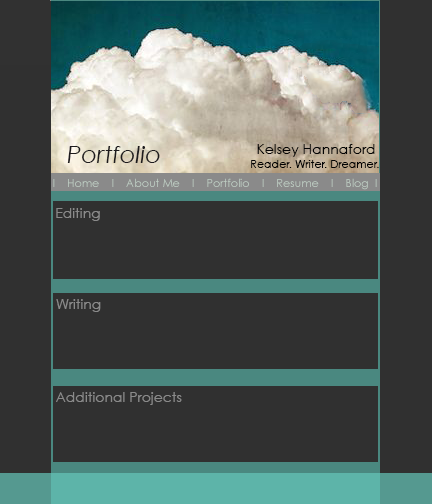
<style>
.page{position:relative;width:432px;height:504px;background:#303030}
.page>*{position:absolute;margin:0}
.t1{font:24px "CenturyGothic-Italic";color:#1d1b1d}
.t2{font:14px "CenturyGothic";color:#030303}
.t3{font:11px "CenturyGothic";color:#030303}
.t4{font:11px "CenturyGothic";color:#bfcfc4}
.t5{font:14px "CenturyGothic";color:#8a8a8a}
</style>
<div class="page">
<p class="t1" style="left:67px;top:146px;width:93px;height:17px">Portfolio</p>
<p class="t2" style="left:257px;top:144px;width:118px;height:13px">Kelsey Hannaford</p>
<p class="t3" style="left:251px;top:160px;width:128px;height:8px">Reader. Writer. Dreamer.</p>
<p class="t4" style="left:53px;top:178px;width:324px;height:12px">I    Home    I    About Me    I    Portfolio    I    Resume    I    Blog  I</p>
<p class="t5" style="left:56px;top:208px;width:44px;height:13px">Editing</p>
<p class="t5" style="left:56px;top:299px;width:45px;height:13px">Writing</p>
<p class="t5" style="left:56px;top:392px;width:126px;height:13px">Additional Projects</p>
</div>
